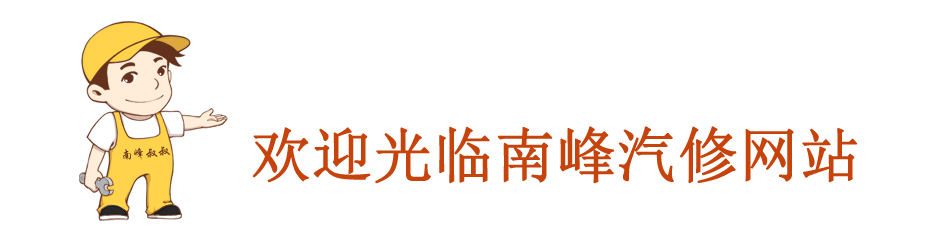
<style>
.page{position:relative;width:940px;height:245px;background:#ffffff}
.page>*{position:absolute;margin:0}
.t1{font:60px "SimSun";color:#c6430c;font-weight:bold}
.t2{font:12.4px "STXingkai";color:#64321c}
</style>
<div class="page">
<p class="t1" style="left:252px;top:126px;width:606px;height:58px">欢迎光临南峰汽修网站</p>
<p class="t2" style="left:123px;top:146px;width:47px;height:14px;rotate:-5deg">南峰叔叔</p>
</div>
